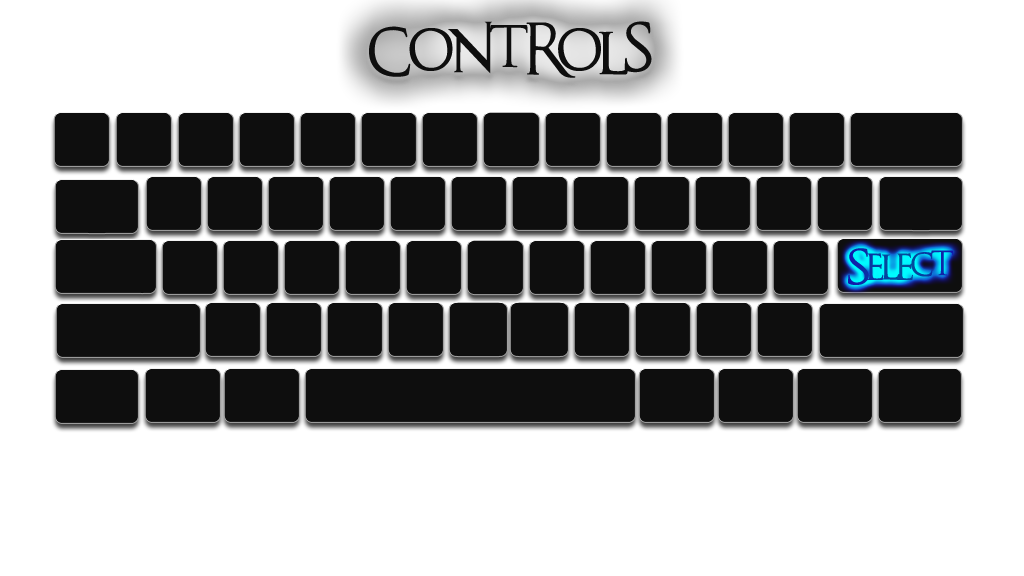
<style>
.page{position:relative;width:1024px;height:576px;background:#ffffff}
.page>*{position:absolute;margin:0}
.t1{font:34px "AnUnfortunateEvent";color:#0e0e0e}
.t2{font:20px "AnUnfortunateEvent";color:#0936a3}
</style>
<div class="page">
<p class="t1" style="left:369px;top:21px;width:283px;height:57px">Controls</p>
<p class="t2" style="left:848px;top:248px;width:106px;height:37px;text-align:center">Select</p>
</div>
